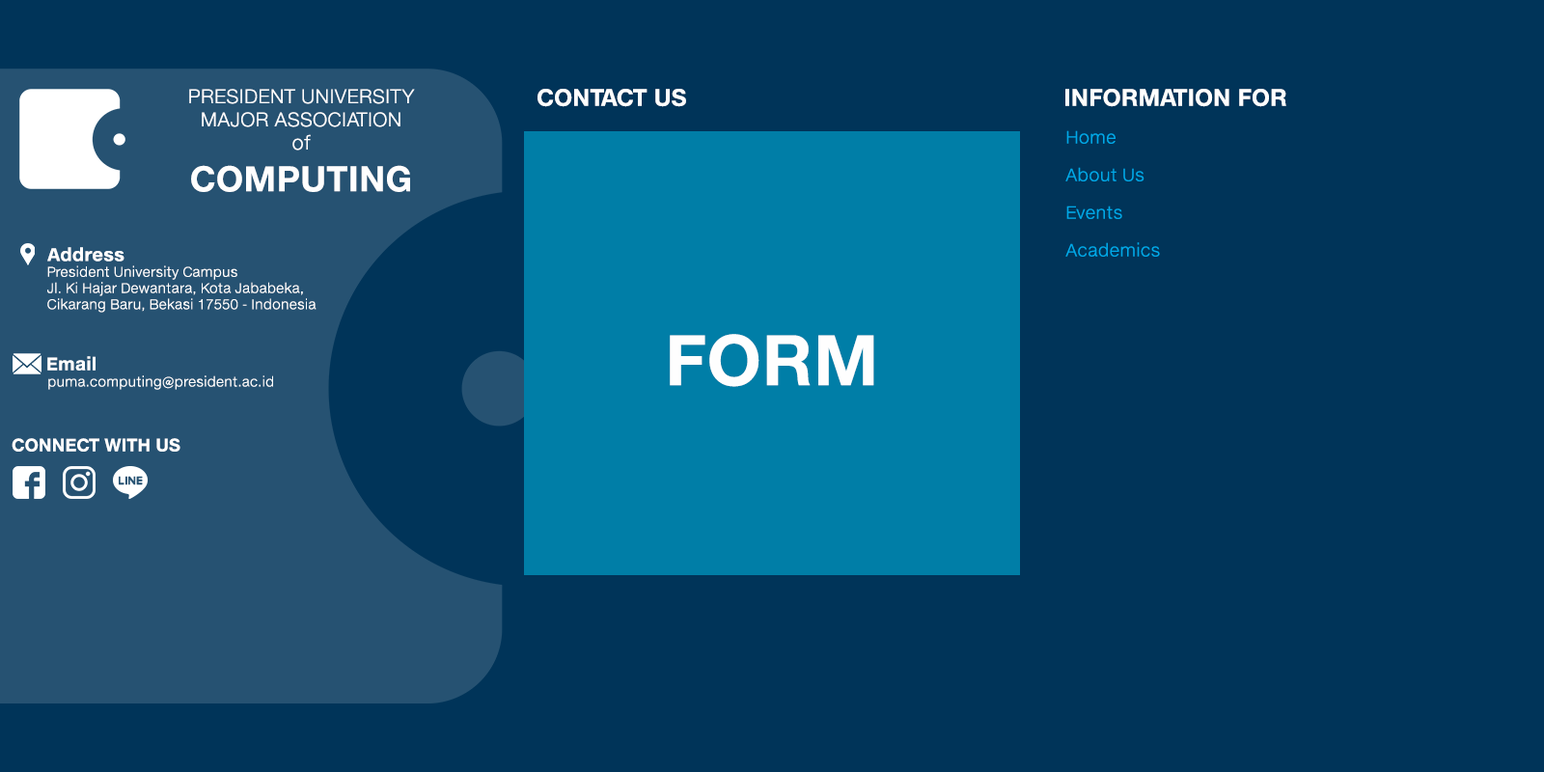
<style>
.page{position:relative;width:1544px;height:772px;background:#003459}
.page>*{position:absolute;margin:0}
.t1{font:19.3px "HelveticaNeueeTextPro-Light";color:#fefefe}
.t2{font:34.7px "HelveticaNeueeTextPro-Bold";color:#fefefe}
.t3{font:23.2px "HelveticaNeueeTextPro-Bold";color:#fefefe}
.t4{font:17.4px "HelveticaNeueeTextPro-Light";color:#00a8e8}
.t5{font:17.8px "HelveticaNeueeTextPro-Bold";color:#fefefe}
.t6{font:13.5px "HelveticaNeueeTextPro-Light";color:#fefefe}
.t7{font:69.5px "HelveticaNeueeTextPro-Bold";color:#fefefe}
.t8{font:17.4px "HelveticaNeueeTextPro-Bold";color:#fefefe}
</style>
<div class="page">
<p class="t1" style="left:189px;top:89px;width:226px;height:103px;text-align:center">PRESIDENT UNIVERSITY<br>MAJOR ASSOCIATION<br>of<br><span class="t2">COMPUTING</span></p>
<p class="t3" style="left:538px;top:89px;width:148px;height:18px">CONTACT US</p>
<p class="t3" style="left:1066px;top:89px;width:221px;height:18px">INFORMATION FOR</p>
<p class="t4" style="left:1067px;top:130px;width:49px;height:14px">Home</p>
<p class="t4" style="left:1066px;top:167px;width:79px;height:14px">About Us</p>
<p class="t4" style="left:1067px;top:206px;width:56px;height:13px">Events</p>
<p class="t4" style="left:1066px;top:242px;width:94px;height:15px">Academics</p>
<p class="t5" style="left:47px;top:247px;width:78px;height:15px">Address</p>
<p class="t6" style="left:47px;top:265px;width:270px;height:48px">President University Campus<br>Jl. Ki Hajar Dewantara, Kota Jababeka,<br>Cikarang Baru, Bekasi 17550 - Indonesia</p>
<p class="t7" style="left:670px;top:334px;width:204px;height:53px">FORM</p>
<p class="t8" style="left:47px;top:356px;width:49px;height:15px">Email</p>
<p class="t6" style="left:48px;top:375px;width:225px;height:15px">puma.computing@president.ac.id</p>
<p class="t8" style="left:12px;top:438px;width:168px;height:14px">CONNECT WITH US</p>
</div>
